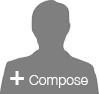
<style>
.page{position:relative;width:99px;height:94px;background:#7f7f7f}
.page>*{position:absolute;margin:0}
.t1{font:14px "HelveticaNeue-Light";color:#ffffff}
.t2{font:27px "HelveticaNeue-Bold";color:#ffffff}
</style>
<div class="page">
<p class="t1" style="left:10px;top:71px;width:78px;height:17px"><span class="t2">+</span> Compose</p>
</div>
